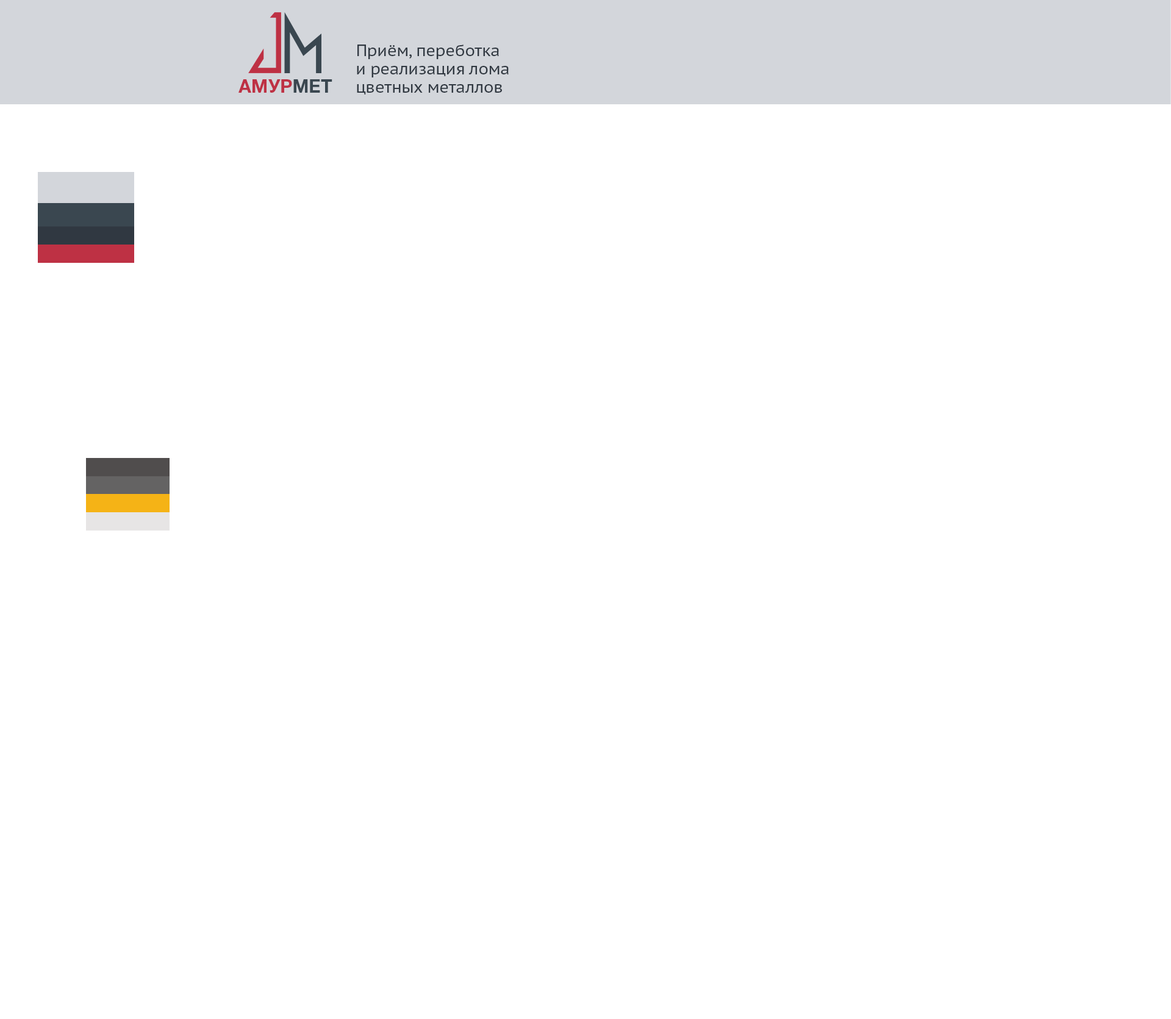
<style>
.page{position:relative;width:1171px;height:1019px;background:#ffffff}
.page>*{position:absolute;margin:0}
.t1{font:15.9px/18.3px "PTSansPro-Caption";color:#303841}
.t2{font:18.3px "HelveticaNeueCyr-Bold";color:#be3144;text-transform:uppercase}
.t3{font:18.3px "HelveticaNeueCyr-Bold";color:#3a4750;text-transform:uppercase}
</style>
<div class="page">
<p class="t1" style="left:357px;top:45px;width:151px;height:49px">Приём, переботка<br>и реализация лома<br>цветных металлов</p>
<p class="t2" style="left:238px;top:79px;width:94px;height:14px">амур<span class="t3">мет</span></p>
</div>
